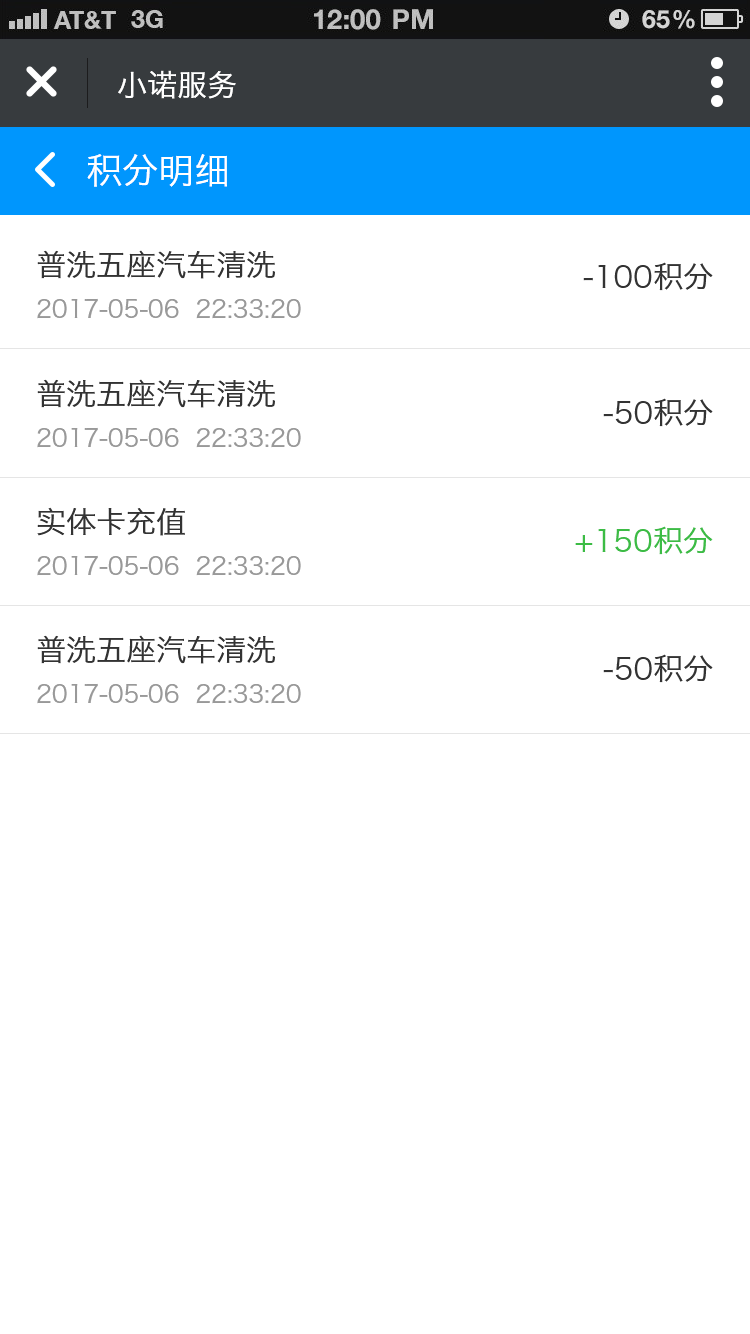
<style>
.page{position:relative;width:750px;height:1334px;background:#ffffff}
.page>*{position:absolute;margin:0}
.t1{font:30px "HiraginoSansGB-W3";color:#ffffff}
.t2{font:36px "HiraginoSansGB-W3";color:#ffffff}
.t3{font:30px "HiraginoSansGB-W3";color:#333333}
.t4{font:24px "HiraginoSansGB-W3";color:#999999}
.t5{font:30px "HiraginoSansGB-W3";color:#3cbc45}
</style>
<div class="page">
<p class="t1" style="left:118px;top:70px;width:118px;height:29px">小诺服务</p>
<p class="t2" style="left:87px;top:154px;width:140px;height:33px">积分明细</p>
<p class="t3" style="left:37px;top:250px;width:238px;height:29px">普洗五座汽车清洗</p>
<p class="t3" style="left:583px;top:262px;width:130px;height:29px">-100积分</p>
<p class="t4" style="left:37px;top:298px;width:264px;height:21px">2017-05-06  22:33:20</p>
<p class="t3" style="left:37px;top:379px;width:238px;height:29px">普洗五座汽车清洗</p>
<p class="t3" style="left:603px;top:398px;width:110px;height:29px">-50积分</p>
<p class="t4" style="left:37px;top:427px;width:264px;height:21px">2017-05-06  22:33:20</p>
<p class="t3" style="left:37px;top:507px;width:148px;height:29px">实体卡充值</p>
<p class="t5" style="left:575px;top:526px;width:138px;height:29px">+150积分</p>
<p class="t4" style="left:37px;top:555px;width:264px;height:21px">2017-05-06  22:33:20</p>
<p class="t3" style="left:37px;top:635px;width:238px;height:29px">普洗五座汽车清洗</p>
<p class="t3" style="left:603px;top:654px;width:110px;height:29px">-50积分</p>
<p class="t4" style="left:37px;top:683px;width:264px;height:21px">2017-05-06  22:33:20</p>
</div>
